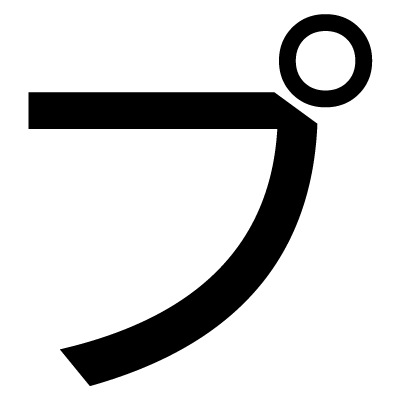
<style>
.page{position:relative;width:400px;height:400px;background:#ffffff}
.page>*{position:absolute;margin:0}
.t1{font:424.8px "MS-PGothic";color:#000000}
</style>
<div class="page">
<p class="t1" style="left:28px;top:14px;width:345px;height:372px">プ</p>
</div>
